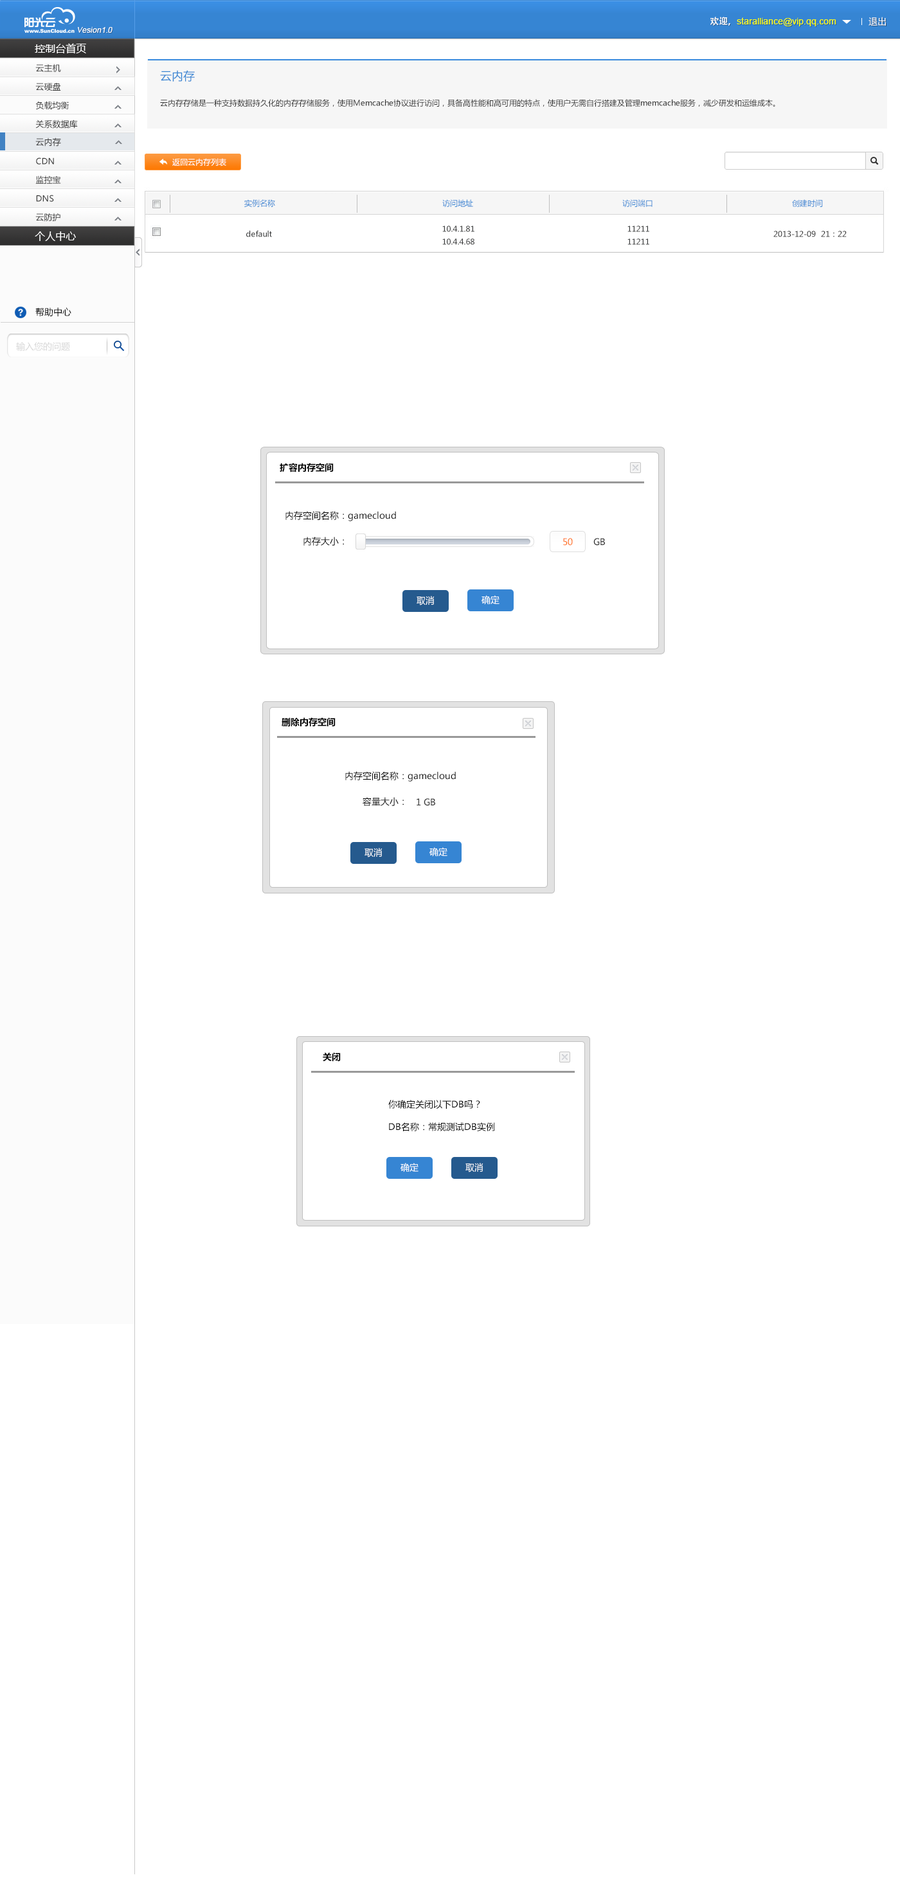
<style>
.page{position:relative;width:900px;height:1891px;background:#ffffff}
.page>*{position:absolute;margin:0}
.t1{font:9px "ArialMT";color:#fcff0e}
.t2{font:9px "AdobeHeitiStd-Regular";color:#ffffff}
.t3{font:9px "MicrosoftYaHei";color:#ffffff}
.t4{font:7.7px "ArialMT";color:#ffffff;font-style:italic}
.t5{font:10.3px "MicrosoftYaHei";color:#ffffff}
.t6{font:8.4px "MicrosoftYaHei";color:#333333}
.t7{font:11.6px "MicrosoftYaHei";color:#3685d3}
.t8{font:7.7px "MicrosoftYaHei";color:#333333}
.t9{font:7.7px "MicrosoftYaHei";color:#ffffff}
.t10{font:7.7px "MicrosoftYaHei";color:#3685d3}
.t11{font:7.7px "MicrosoftYaHei";color:#373839}
.t12{font:7.7px/12.9px "MicrosoftYaHei";color:#373839}
.t13{font:9px "MicrosoftYaHei";color:#000000}
.t14{font:9px "MicrosoftYaHei";color:#d7d7d7}
.t15{font:9px "MicrosoftYaHei-Bold";color:#000000}
.t16{font:9px/25.7px "MicrosoftYaHei";color:#000000}
.t17{font:9px "MicrosoftYaHei";color:#ff6600}
.t18{font:9px "MicrosoftYaHei";color:#333333}
.t19{font:9px/22.5px "MicrosoftYaHei";color:#000000}
</style>
<div class="page">
<p class="t1" style="left:710px;top:17px;width:126px;height:9px"><span class="t2">欢迎，</span>staralliance@vip.qq.com</p>
<p class="t3" style="left:869px;top:17px;width:17px;height:9px">退出</p>
<p class="t4" style="left:78px;top:27px;width:35px;height:6px">Vesion1.0</p>
<p class="t5" style="left:35px;top:43px;width:51px;height:11px">控制台首页</p>
<p class="t6" style="left:35px;top:64px;width:26px;height:9px">云主机</p>
<p class="t7" style="left:160px;top:70px;width:35px;height:12px">云内存</p>
<p class="t6" style="left:35px;top:82px;width:26px;height:9px">云硬盘</p>
<p class="t6" style="left:35px;top:101px;width:34px;height:9px">负载均衡</p>
<p class="t8" style="left:160px;top:99px;width:615px;height:8px">云内存存储是一种支持数据持久化的内存存储服务，使用Memcache协议进行访问，具备高性能和高可用的特点，使用户无需自行搭建及管理memcache服务，减少研发和运维成本。</p>
<p class="t6" style="left:35px;top:120px;width:43px;height:9px">关系数据库</p>
<p class="t6" style="left:35px;top:138px;width:26px;height:9px">云内存</p>
<p class="t6" style="left:36px;top:158px;width:18px;height:7px">CDN</p>
<p class="t9" style="left:172px;top:158px;width:54px;height:8px">返回云内存列表</p>
<p class="t6" style="left:35px;top:176px;width:26px;height:8px">监控宝</p>
<p class="t6" style="left:36px;top:195px;width:18px;height:7px">DNS</p>
<p class="t10" style="left:244px;top:199px;width:579px;height:9px">实例名称                                                                 访问地址                                                          访问端口                                                      创建时间</p>
<p class="t6" style="left:35px;top:213px;width:25px;height:9px">云防护</p>
<p class="t5" style="left:35px;top:231px;width:41px;height:10px">个人中心</p>
<p class="t11" style="left:246px;top:230px;width:26px;height:7px">default</p>
<p class="t12" style="left:442px;top:226px;width:32px;height:19px">10.4.1.81<br>10.4.4.68</p>
<p class="t12" style="left:627px;top:226px;width:22px;height:19px">11211<br>11211</p>
<p class="t8" style="left:773px;top:231px;width:74px;height:6px">2013-12-09  21：22</p>
<p class="t13" style="left:35px;top:307px;width:36px;height:10px">帮助中心</p>
<p class="t14" style="left:16px;top:342px;width:54px;height:9px">输入您的问题</p>
<p class="t15" style="left:280px;top:463px;width:54px;height:10px">扩容内存空间</p>
<p class="t16" style="left:285px;top:511px;width:111px;height:35px">内存空间名称：gamecloud<br>       内存大小：</p>
<p class="t17" style="left:563px;top:538px;width:10px;height:8px">50</p>
<p class="t18" style="left:593px;top:538px;width:12px;height:8px">GB</p>
<p class="t3" style="left:417px;top:596px;width:18px;height:10px">取消</p>
<p class="t3" style="left:482px;top:595px;width:18px;height:10px">确定</p>
<p class="t15" style="left:282px;top:717px;width:54px;height:10px">删除内存空间</p>
<p class="t16" style="left:345px;top:771px;width:111px;height:35px">内存空间名称：gamecloud<br>       容量大小：</p>
<p class="t18" style="left:417px;top:798px;width:18px;height:8px">1 GB</p>
<p class="t3" style="left:364px;top:848px;width:18px;height:10px">取消</p>
<p class="t3" style="left:429px;top:847px;width:18px;height:10px">确定</p>
<p class="t15" style="left:323px;top:1052px;width:18px;height:10px">关闭</p>
<p class="t19" style="left:388px;top:1100px;width:107px;height:31px">你确定关闭以下DB吗？<br>DB名称：常规测试DB实例</p>
<p class="t3" style="left:401px;top:1163px;width:18px;height:10px">确定</p>
<p class="t3" style="left:465px;top:1163px;width:18px;height:10px">取消</p>
</div>
